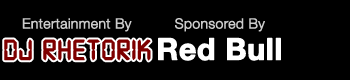
<style>
.page{position:relative;width:350px;height:80px;background:#000000}
.page>*{position:absolute;margin:0}
.t1{font:14px "HelveticaNeue-Light";color:#cccccc;font-weight:bold}
.t2{font:30px "Digital-7";color:#7e0000;text-transform:uppercase;font-weight:bold}
.t3{font:30px "HelveticaNeue-Bold";color:#ffffff;font-weight:bold}
</style>
<div class="page">
<p class="t1" style="left:22px;top:18px;width:110px;height:14px">Entertainment By</p>
<p class="t1" style="left:175px;top:18px;width:90px;height:14px">Sponsored By</p>
<p class="t2" style="left:4px;top:39px;width:147px;height:22px">DJ RHETORIK</p>
<p class="t3" style="left:158px;top:37px;width:123px;height:24px">Red Bull</p>
</div>
